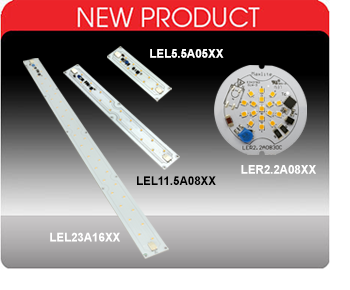
<style>
.page{position:relative;width:350px;height:290px}
.page>*{position:absolute;margin:0}
.t1{font:12.3px "Arial-BoldMT";letter-spacing:-0.01em;color:#ffffff;scale:0.95 1}
.t2{font:12.3px "Arial-BoldMT";letter-spacing:-0.01em;color:#000000;scale:0.95 1}
</style>
<div class="page">
<p class="t1" style="left:150px;top:49px;width:74px;height:9px">LEL5.5A05XX</p>
<p class="t1" style="left:241px;top:165px;width:75px;height:9px">LER2.2A08XX</p>
<p class="t2" style="left:137px;top:176px;width:79px;height:9px">LEL11.5A08XX</p>
<p class="t1" style="left:50px;top:232px;width:70px;height:10px">LEL23A16XX</p>
</div>
